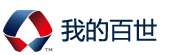
<style>
.page{position:relative;width:174px;height:55px;background:#ffffff}
.page>*{position:absolute;margin:0}
.t1{font:24px "MicrosoftYaHei";color:#022345}
</style>
<div class="page">
<p class="t1" style="left:61px;top:18px;width:96px;height:24px">我的百世</p>
</div>
